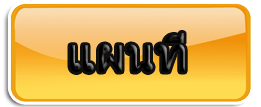
<style>
.page{position:relative;width:261px;height:107px}
.page>*{position:absolute;margin:0}
.t1{font:48px "Tahoma"}
</style>
<div class="page">
<p class="t1" style="left:70px;top:33px;width:115px;height:39px">แผนที</p>
</div>
